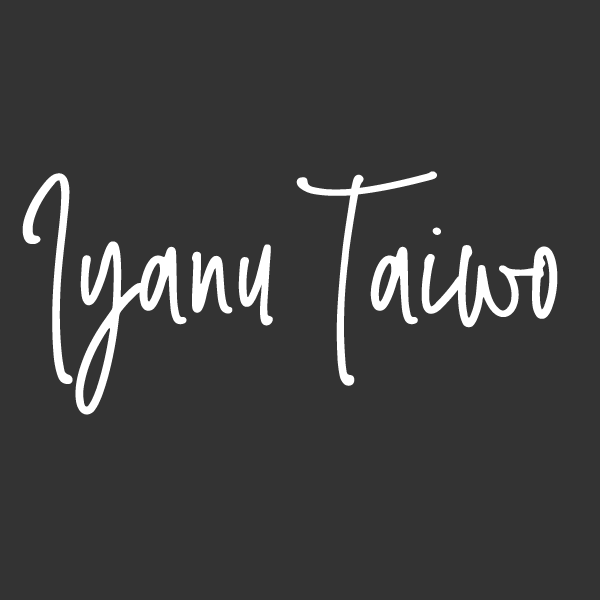
<style>
.page{position:relative;width:600px;height:600px;background:#333333}
.page>*{position:absolute;margin:0}
.t1{font:176.7px "SmoothStone-Regular";color:#ffffff}
</style>
<div class="page">
<p class="t1" style="left:22px;top:171px;width:536px;height:244px">Iyanu Taiwo</p>
</div>
